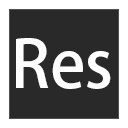
<style>
.page{position:relative;width:128px;height:128px;background:#292929}
.page>*{position:absolute;margin:0}
.t1{font:65px "AdobeHeitiStd-Regular";color:#ffffff}
</style>
<div class="page">
<p class="t1" style="left:16px;top:38px;width:95px;height:51px">Res</p>
</div>
